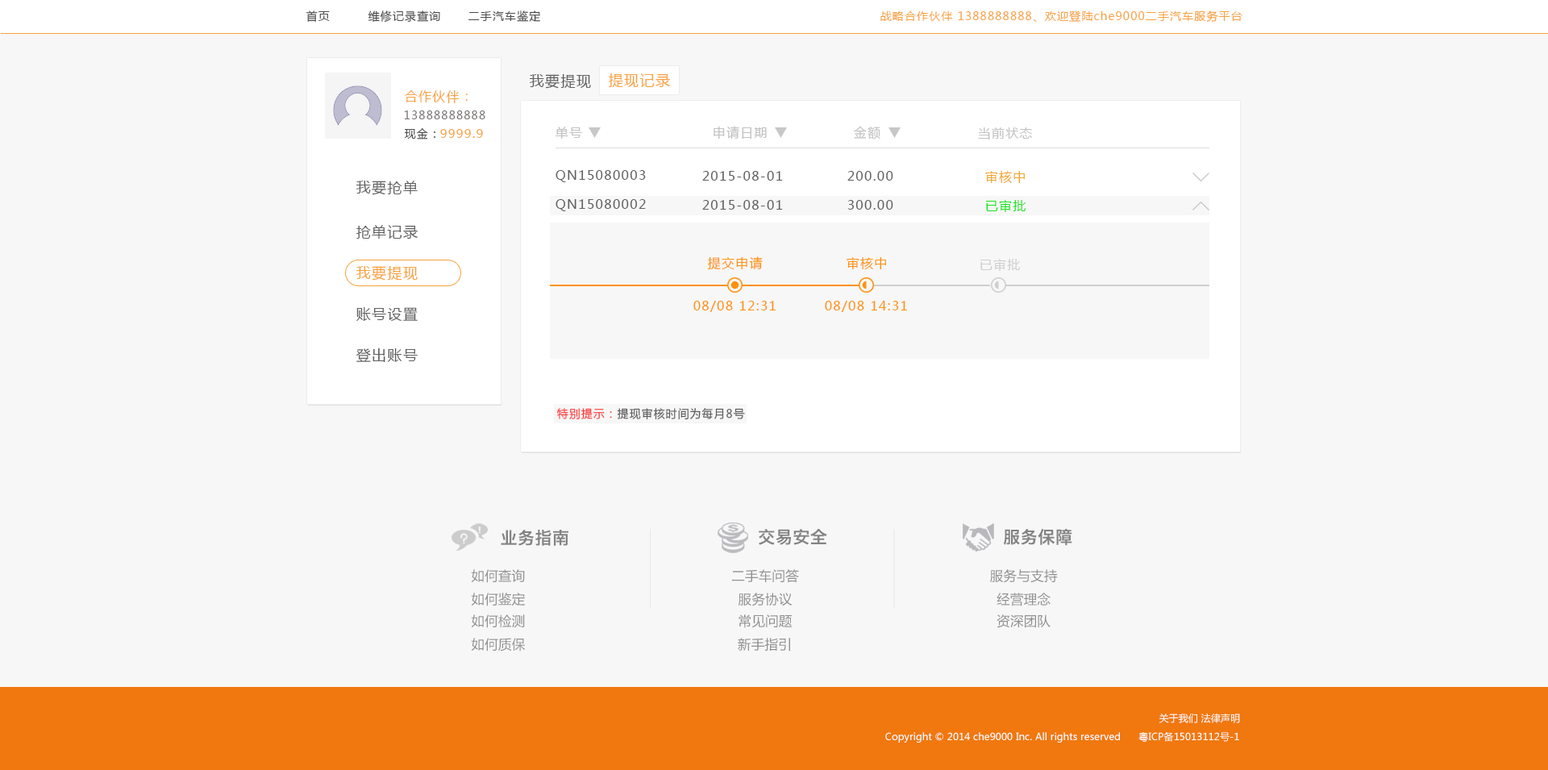
<style>
.page{position:relative;width:1548px;height:770px;background:#f7f7f7}
.page>*{position:absolute;margin:0}
.t1{font:11.3px "MicrosoftYaHei";letter-spacing:0.08em;color:#494949}
.t2{font:11.3px "MicrosoftYaHei";letter-spacing:0.08em;color:#f7a13c}
.t3{font:14.5px "MicrosoftYaHei";letter-spacing:0.08em;color:#606060}
.t4{font:14.5px "MicrosoftYaHei";letter-spacing:0.08em;color:#f7a13c}
.t5{font:12.9px "MicrosoftYaHei";letter-spacing:0.08em;color:#f7a13c}
.t6{font:11.3px "MicrosoftYaHei";letter-spacing:0.08em;color:#787373}
.t7{font:12.9px "MicrosoftYaHei";letter-spacing:0.08em;color:#c1c1c1}
.t8{font:12.1px "MicrosoftYaHei";letter-spacing:0.08em;color:#f7a13c}
.t9{font:12.9px "MicrosoftYaHei";letter-spacing:0.08em;color:#606060}
.t10{font:12.9px "MicrosoftYaHei";letter-spacing:0.08em;color:#f1a52c}
.t11{font:12.9px "MicrosoftYaHei";letter-spacing:0.08em;color:#18e31d}
.t12{font:12.9px "MicrosoftYaHei";letter-spacing:0.08em;color:#fe920f}
.t13{font:12.9px "MicrosoftYaHei";letter-spacing:0.08em;color:#cfcfcf}
.t14{font:11.3px "MicrosoftYaHei";letter-spacing:0.08em;color:#5c5c5c}
.t15{font:11.3px "MicrosoftYaHei";letter-spacing:0.08em;color:#fc3535}
.t16{font:17.2px "HiraginoSansGB-W6";letter-spacing:0.01em;color:#838383}
.t17{font:13.4px "MicrosoftYaHei";letter-spacing:0.01em;color:#909090}
.t18{font:9.7px "MicrosoftYaHei";letter-spacing:0.01em;color:#ffffff}
</style>
<div class="page">
<p class="t1" style="left:306px;top:10px;width:24px;height:12px">首页</p>
<p class="t1" style="left:368px;top:10px;width:72px;height:13px">维修记录查询</p>
<p class="t1" style="left:469px;top:10px;width:71px;height:12px">二手汽车鉴定</p>
<p class="t2" style="left:881px;top:10px;width:362px;height:12px">战略合作伙伴 1388888888、欢迎登陆che9000二手汽车服务平台</p>
<p class="t3" style="left:529px;top:74px;width:62px;height:15px">我要提现</p>
<p class="t4" style="left:609px;top:73px;width:61px;height:15px">提现记录</p>
<p class="t5" style="left:404px;top:90px;width:64px;height:13px">合作伙伴：</p>
<p class="t6" style="left:404px;top:110px;width:81px;height:9px">13888888888</p>
<p class="t7" style="left:714px;top:126px;width:53px;height:14px">申请日期</p>
<p class="t7" style="left:854px;top:126px;width:27px;height:14px">金额</p>
<p class="t1" style="left:405px;top:128px;width:30px;height:12px">现金：</p>
<p class="t8" style="left:440px;top:129px;width:43px;height:9px">9999.9</p>
<p class="t7" style="left:556px;top:127px;width:26px;height:12px">单号</p>
<p class="t7" style="left:978px;top:127px;width:55px;height:13px">当前状态</p>
<p class="t9" style="left:556px;top:170px;width:90px;height:12px">QN15080003</p>
<p class="t9" style="left:702px;top:171px;width:81px;height:10px">2015-08-01</p>
<p class="t9" style="left:848px;top:171px;width:46px;height:10px">200.00</p>
<p class="t10" style="left:985px;top:171px;width:40px;height:12px">审核中</p>
<p class="t3" style="left:356px;top:181px;width:62px;height:14px">我要抢单</p>
<p class="t9" style="left:556px;top:199px;width:90px;height:12px">QN15080002</p>
<p class="t9" style="left:702px;top:200px;width:81px;height:10px">2015-08-01</p>
<p class="t9" style="left:848px;top:200px;width:46px;height:10px">300.00</p>
<p class="t11" style="left:985px;top:200px;width:41px;height:12px">已审批</p>
<p class="t3" style="left:356px;top:225px;width:62px;height:15px">抢单记录</p>
<p class="t12" style="left:708px;top:256px;width:55px;height:14px">提交申请</p>
<p class="t12" style="left:847px;top:257px;width:39px;height:12px">审核中</p>
<p class="t4" style="left:356px;top:266px;width:62px;height:15px">我要提现</p>
<p class="t13" style="left:980px;top:259px;width:40px;height:12px">已审批</p>
<p class="t12" style="left:694px;top:301px;width:82px;height:11px">08/08 12:31</p>
<p class="t12" style="left:825px;top:301px;width:82px;height:11px">08/08 14:31</p>
<p class="t3" style="left:356px;top:307px;width:62px;height:14px">账号设置</p>
<p class="t3" style="left:356px;top:348px;width:62px;height:14px">登出账号</p>
<p class="t14" style="left:557px;top:408px;width:188px;height:12px"><span class="t15">特别提示：</span>提现审核时间为每月8号</p>
<p class="t16" style="left:501px;top:530px;width:68px;height:16px">业务指南</p>
<p class="t16" style="left:759px;top:529px;width:68px;height:16px">交易安全</p>
<p class="t16" style="left:1003px;top:528px;width:70px;height:18px">服务保障</p>
<p class="t17" style="left:471px;top:569px;width:54px;height:14px">如何查询</p>
<p class="t17" style="left:731px;top:569px;width:68px;height:14px">二手车问答</p>
<p class="t17" style="left:990px;top:569px;width:68px;height:14px">服务与支持</p>
<p class="t17" style="left:471px;top:593px;width:54px;height:13px">如何鉴定</p>
<p class="t17" style="left:738px;top:593px;width:54px;height:13px">服务协议</p>
<p class="t17" style="left:997px;top:593px;width:54px;height:13px">经营理念</p>
<p class="t17" style="left:471px;top:614px;width:54px;height:14px">如何检测</p>
<p class="t17" style="left:739px;top:614px;width:54px;height:14px">常见问题</p>
<p class="t17" style="left:997px;top:614px;width:54px;height:14px">资深团队</p>
<p class="t17" style="left:471px;top:638px;width:54px;height:14px">如何质保</p>
<p class="t17" style="left:738px;top:638px;width:52px;height:14px">新手指引</p>
<p class="t18" style="left:1159px;top:714px;width:81px;height:9px">关于我们 法律声明</p>
<p class="t18" style="left:885px;top:731px;width:354px;height:12px">Copyright © 2014 che9000 Inc. All rights reserved      粤ICP备15013112号-1</p>
</div>
